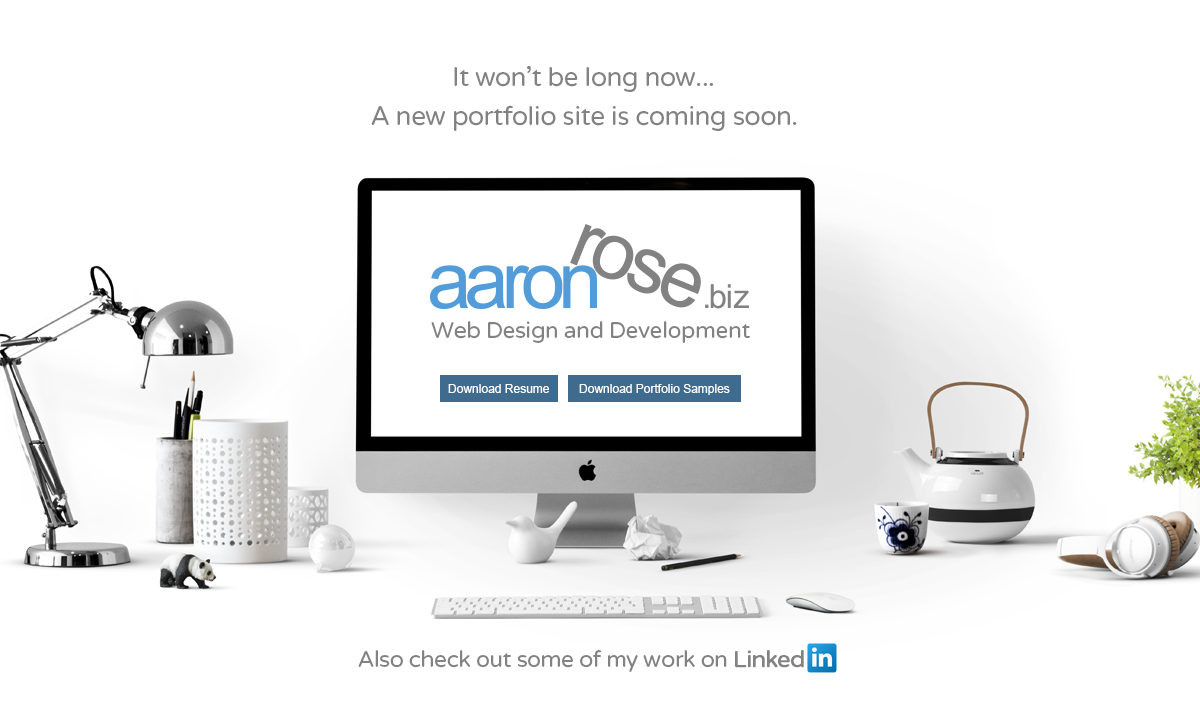
<style>
.page{position:relative;width:1200px;height:705px;background:#ffffff}
.page>*{position:absolute;margin:0}
.t1{font:26.4px "VarelaRound";letter-spacing:-0.02em;color:#828282}
.t2{font:22.9px "VarelaRound";letter-spacing:-0.02em;color:#828282}
.t3{font:12px "ArialMT";color:#ffffff}
.t4{font:22.9px "VarelaRound";letter-spacing:-0.04em;color:#828282;font-weight:bold}
.t5{font:22.9px "VarelaRound";letter-spacing:-0.02em;color:#828282;font-weight:bold}
</style>
<div class="page">
<p class="t1" style="left:454px;top:66px;width:259px;height:26px">It won’t be long now...</p>
<p class="t1" style="left:371px;top:105px;width:426px;height:26px">A new portfolio site is coming soon.</p>
<p class="t2" style="left:431px;top:321px;width:319px;height:22px">Web Design and Development</p>
<p class="t3" style="left:448px;top:384px;width:101px;height:9px">Download Resume</p>
<p class="t3" style="left:579px;top:384px;width:151px;height:11px">Download Portfolio Samples</p>
<p class="t2" style="left:358px;top:650px;width:446px;height:22px">Also check out some of my work on <span class="t4">Linke</span><span class="t5">d</span></p>
</div>
